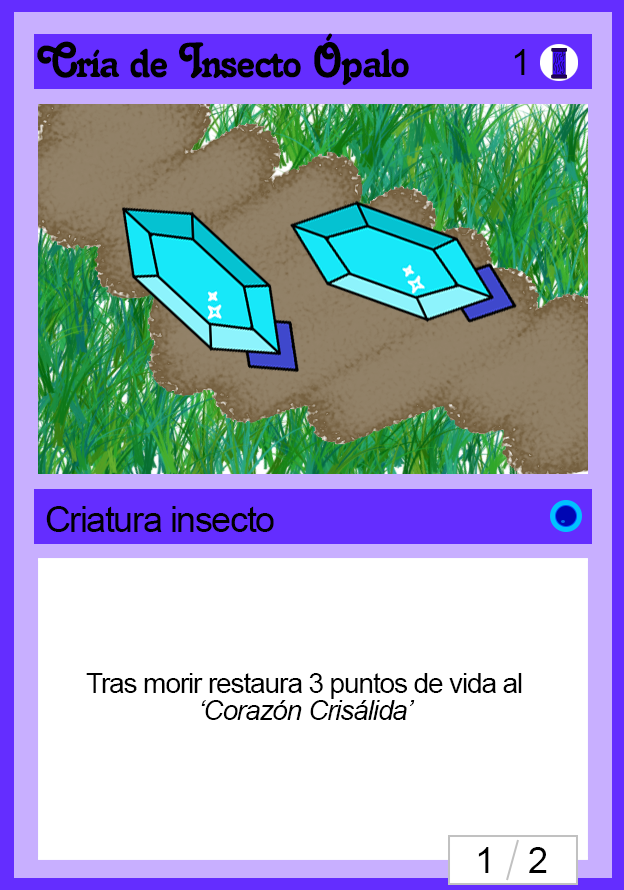
<style>
.page{position:relative;width:624px;height:890px;background:#ffffff}
.page>*{position:absolute;margin:0}
.t1{font:48px "Salina";letter-spacing:-0.04em;color:#000000}
.t2{font:36px "ArialMT";letter-spacing:-0.04em;color:#000000}
.t3{font:28px "ArialMT";letter-spacing:-0.04em;color:#000000}
.t4{font:28px "Arial-ItalicMT";letter-spacing:-0.04em;color:#000000}
</style>
<div class="page">
<p class="t1" style="left:37px;top:33px;width:372px;height:53px">Cría de Insecto Ópalo</p>
<p class="t2" style="left:514px;top:49px;width:11px;height:26px">1</p>
<p class="t2" style="left:46px;top:506px;width:228px;height:26px">Criatura insecto</p>
<p class="t3" style="left:86px;top:673px;width:436px;height:47px">Tras morir restaura 3 puntos de vida al <span class="t4">‘Corazón Crisálida’</span></p>
<p class="t2" style="left:478px;top:847px;width:69px;height:26px">1    2</p>
</div>
